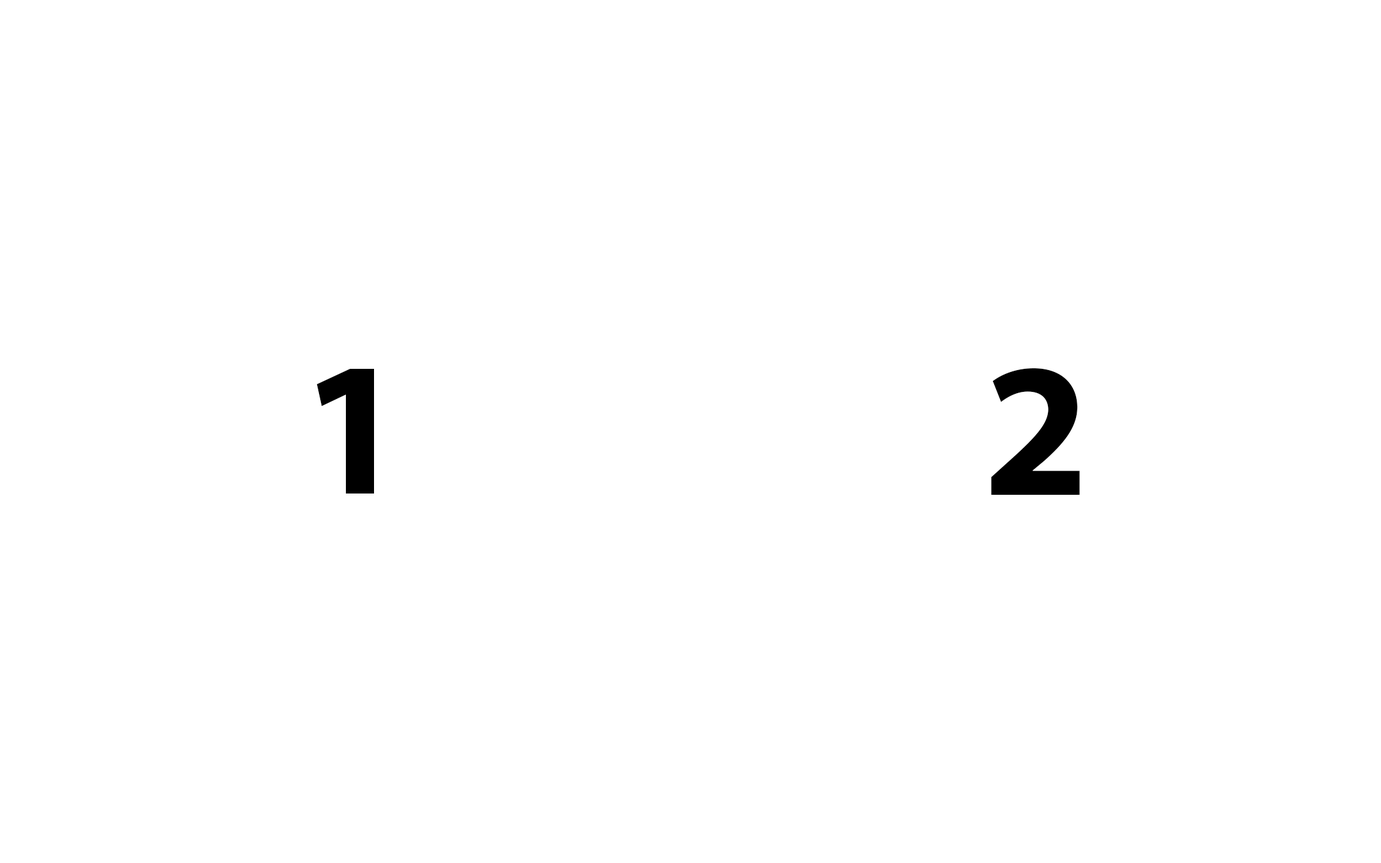
<style>
.page{position:relative;width:1381px;height:863px;background:#ffffff}
.page>*{position:absolute;margin:0}
.t1{font:191.8px "MyriadPro-Bold";color:#000000}
</style>
<div class="page">
<p class="t1" style="left:317px;top:369px;width:57px;height:125px">1</p>
<p class="t1" style="left:991px;top:368px;width:89px;height:127px">2</p>
</div>
